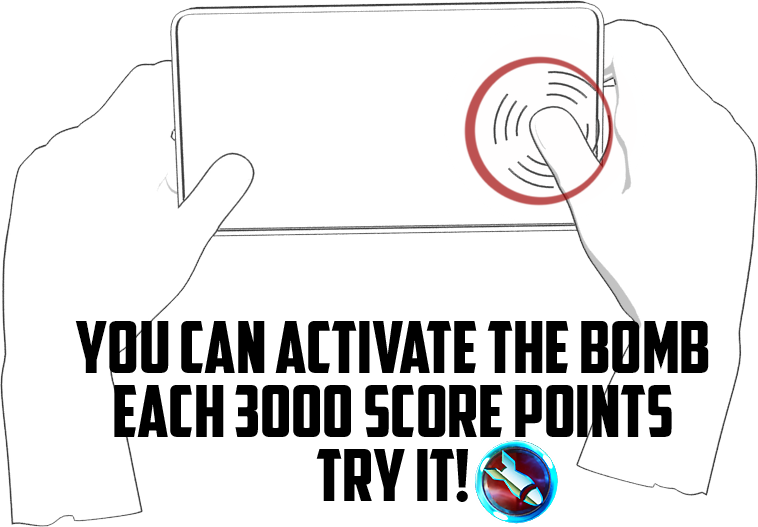
<style>
.page{position:relative;width:758px;height:527px;background:#ffffff}
.page>*{position:absolute;margin:0}
.t1{font:72px/64px "AmericanCaptain";color:#000000}
</style>
<div class="page">
<p class="t1" style="left:75px;top:321px;width:634px;height:181px;text-align:center">YOU CAN ACTIVATE THE BOMB<br>EACH 3000 SCORE POINTS<br>TRY IT!</p>
</div>
